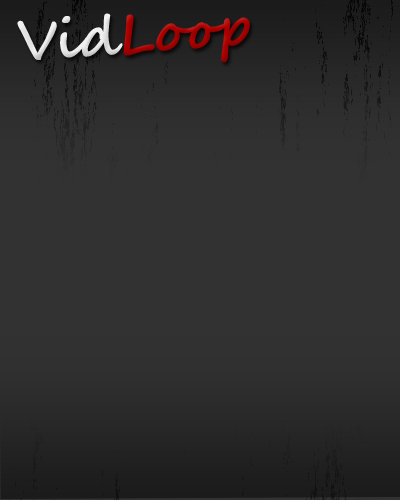
<style>
.page{position:relative;width:400px;height:500px;background:#323232}
.page>*{position:absolute;margin:0}
.t1{font:54px "SegoeScript-Bold";color:#af0000}
.t2{font:54px "SegoeScript-Bold";color:#f0f0f0}
</style>
<div class="page">
<p class="t1" style="left:17px;top:13px;width:233px;height:50px;rotate:-4deg"><span class="t2">Vid</span>Loop</p>
</div>
